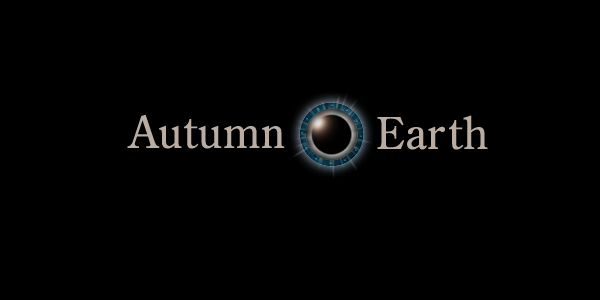
<style>
.page{position:relative;width:600px;height:300px;background:#000000}
.page>*{position:absolute;margin:0}
.t1{font:43.5px "CenturyOldStyleStd-Regular";letter-spacing:0.025em;color:#b8aca3}
</style>
<div class="page">
<p class="t1" style="left:127px;top:114px;width:158px;height:35px">Autumn</p>
<p class="t1" style="left:377px;top:115px;width:111px;height:35px">Earth</p>
</div>
